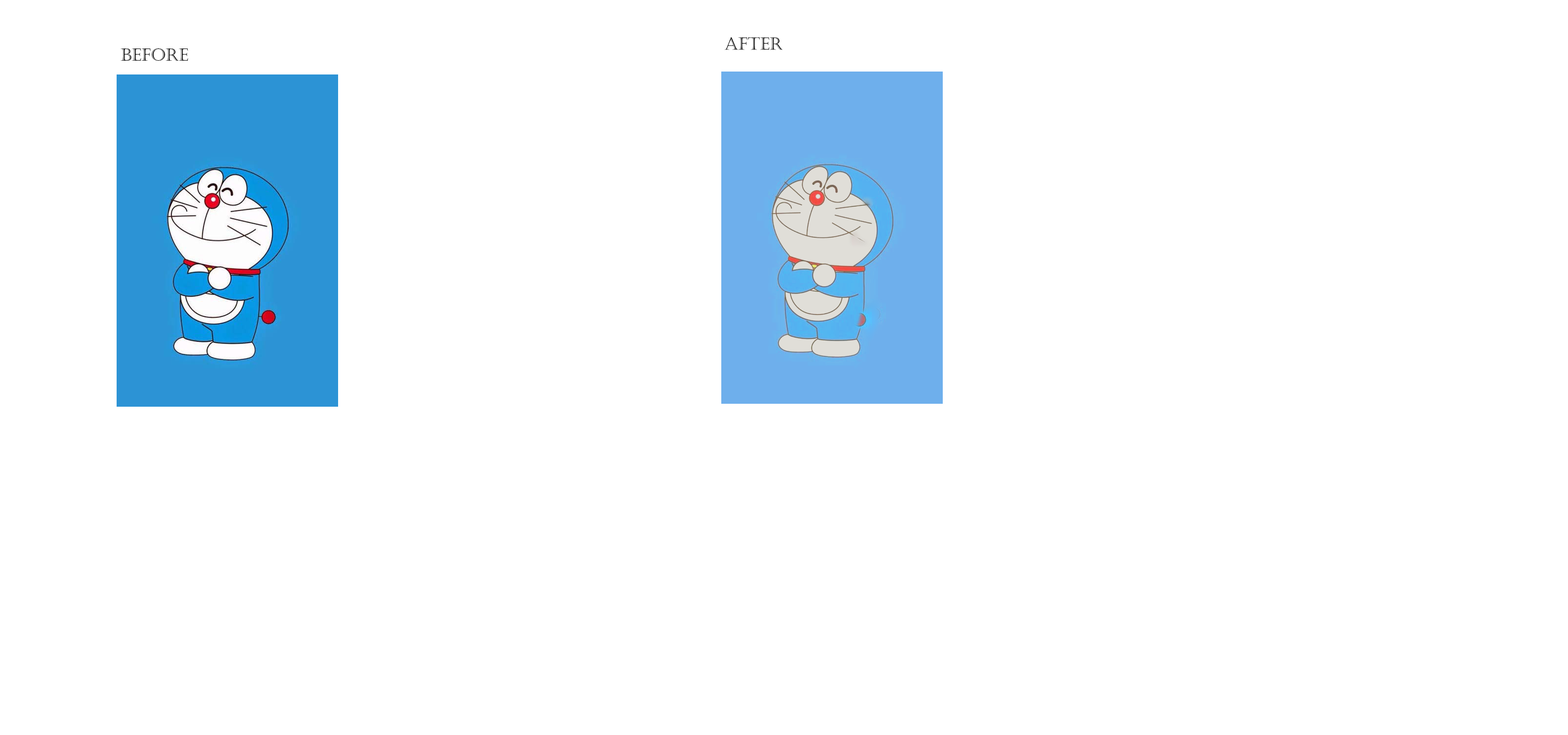
<style>
.page{position:relative;width:1568px;height:735px;background:#ffffff}
.page>*{position:absolute;margin:0}
.t1{font:16.9px "Castellar";color:#010101}
</style>
<div class="page">
<p class="t1" style="left:724px;top:37px;width:59px;height:13px">After</p>
<p class="t1" style="left:121px;top:48px;width:67px;height:13px">Before</p>
</div>
